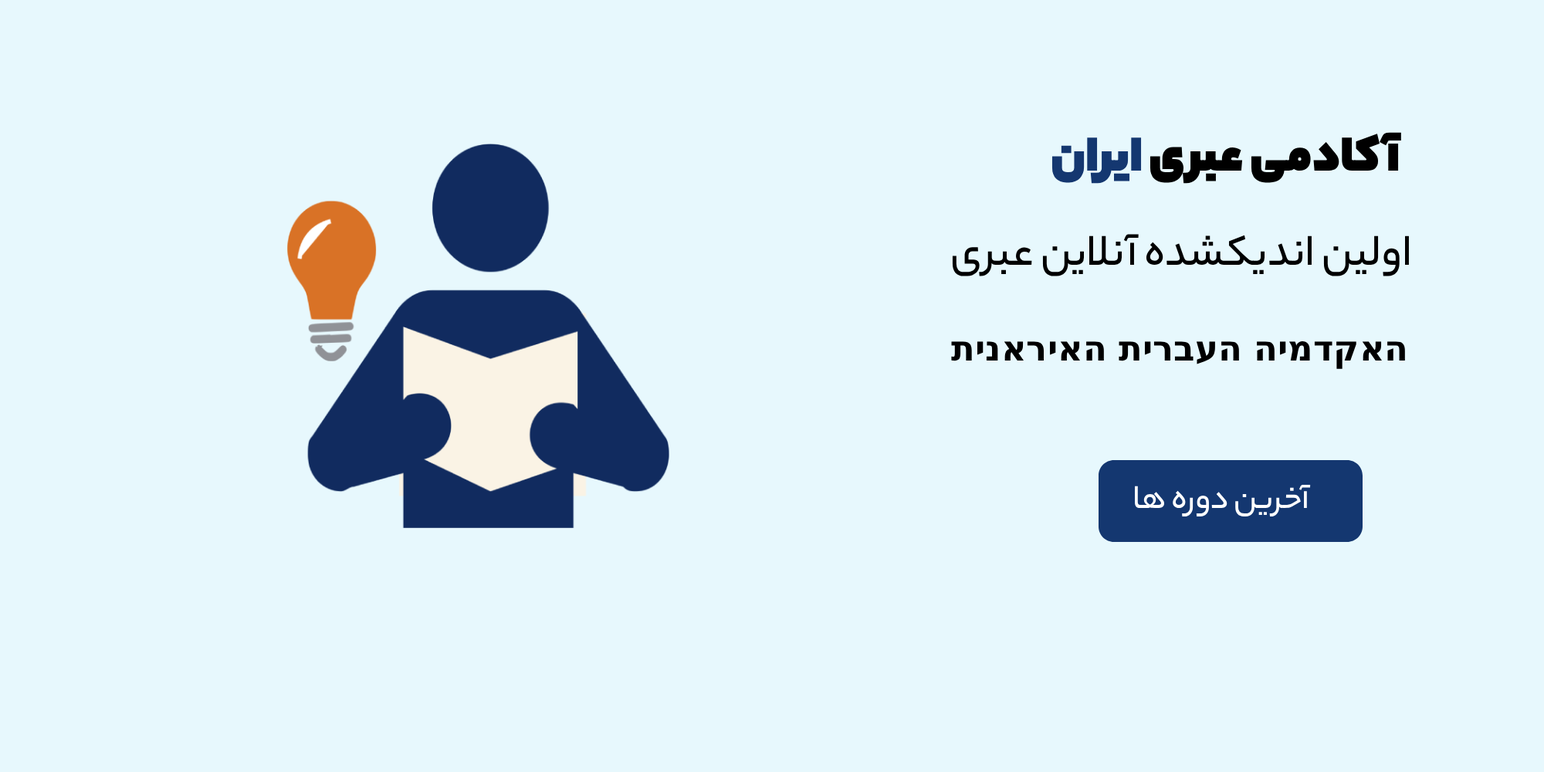
<style>
.page{position:relative;width:1544px;height:772px;background:#e7f8fd}
.page>*{position:absolute;margin:0}
.t1{font:54.1px "YekanBakh-Fat";color:#000000}
.t2{font:54.1px "YekanBakh-Fat";color:#143770}
.t3{font:46.3px "YekanBakh-Medium";color:#000000}
.t4{font:34.7px "DejaVuSans-Bold";color:#000000}
.t5{font:35.1px "YekanBakh-Medium";color:#ffffff}
</style>
<div class="page">
<p class="t1" style="left:1052px;top:132px;width:349px;height:52px">آکادمی عبری <span class="t2">ایران</span></p>
<p class="t3" style="left:952px;top:234px;width:457px;height:42px">اولین اندیکشده آنلاین عبری</p>
<p class="t4" style="left:951px;top:341px;width:454px;height:28px">האקדמיה העברית האיראנית</p>
<p class="t5" style="left:1135px;top:484px;width:176px;height:33px">آخرین دوره ها</p>
</div>
